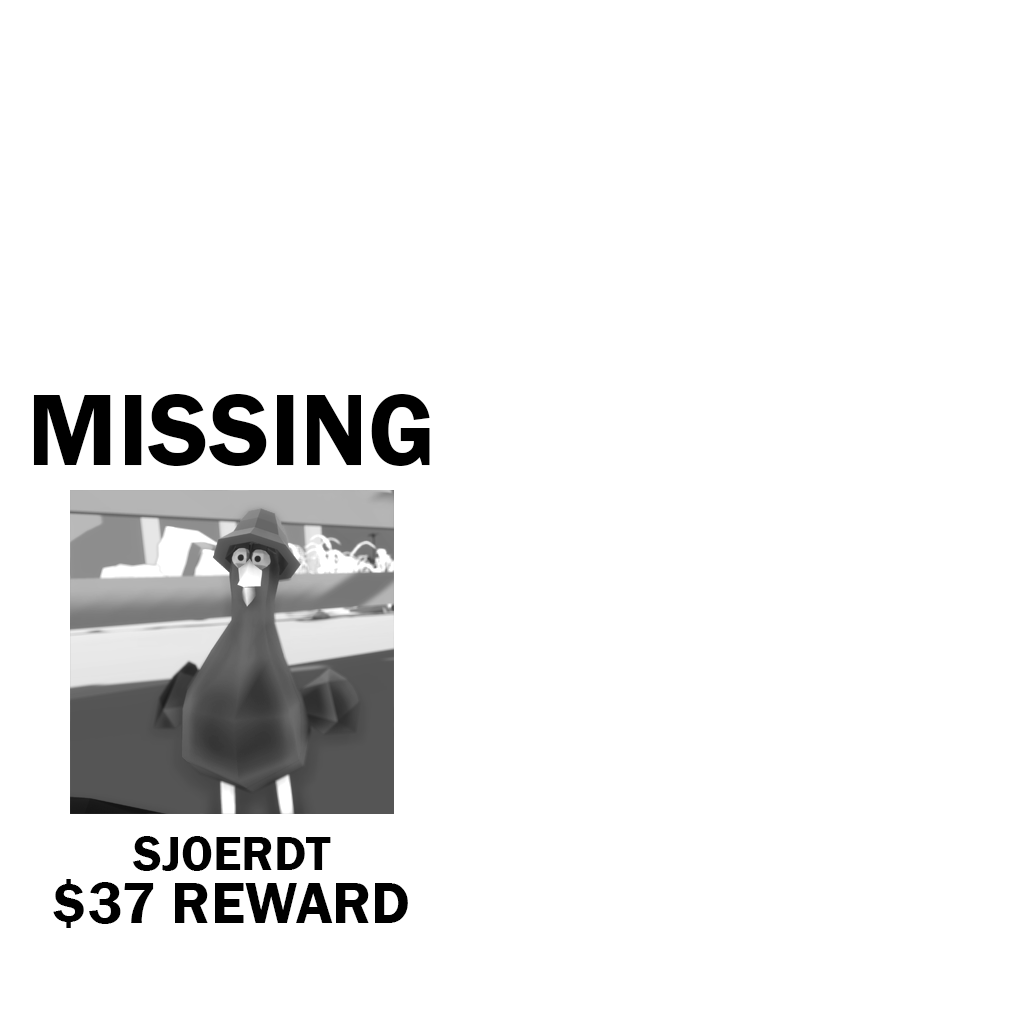
<style>
.page{position:relative;width:1024px;height:1024px;background:#ffffff}
.page>*{position:absolute;margin:0}
.t1{font:105px "FranklinGothic-Demi";color:#000000}
.t2{font:50px "FranklinGothic-Demi";color:#000000}
.t3{font:60px "FranklinGothic-Demi";color:#000000}
</style>
<div class="page">
<p class="t1" style="left:33px;top:394px;width:397px;height:72px">MISSING</p>
<p class="t2" style="left:132px;top:836px;width:199px;height:35px">SJOERDT</p>
<p class="t3" style="left:53px;top:879px;width:355px;height:49px">$37 REWARD</p>
</div>
